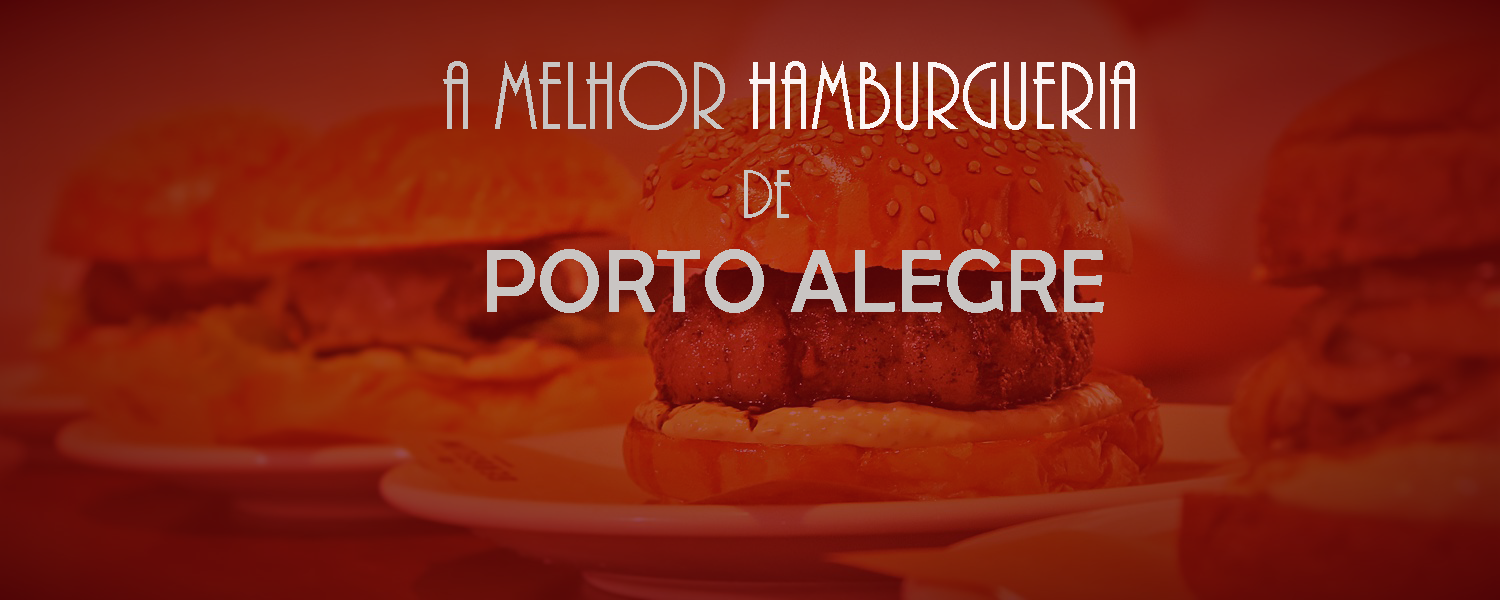
<style>
.page{position:relative;width:1500px;height:600px}
.page>*{position:absolute;margin:0}
.t1{font:100px "ARBONNIE";color:#fbf5f5}
.t2{font:100px "ARBONNIE";color:#c9c5c3}
.t3{font:72px "ARBONNIE";color:#c9c5c3}
.t4{font:90px "BerlinSansFB-Reg";color:#c9c5c3}
</style>
<div class="page">
<p class="t1" style="left:443px;top:61px;width:692px;height:69px"><span class="t2">A melhor </span>Hamburgueria</p>
<p class="t3" style="left:744px;top:170px;width:47px;height:48px">de</p>
<p class="t4" style="left:487px;top:249px;width:617px;height:64px">PORTO ALEGRE</p>
</div>
